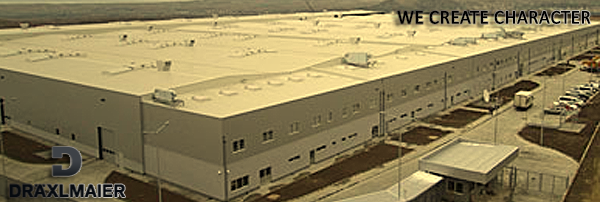
<style>
.page{position:relative;width:600px;height:202px}
.page>*{position:absolute;margin:0}
.t1{font:19.7px "Calibri";color:#000000;font-weight:bold;scale:0.96 1}
</style>
<div class="page">
<p class="t1" style="left:397px;top:10px;width:194px;height:14px">WE CREATE CHARACTER</p>
</div>
